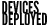
<style>
.page{position:relative;width:53px;height:25px;background:#ffffff}
.page>*{position:absolute;margin:0}
.t1{font:17px "LeagueGothic";color:#060606}
</style>
<div class="page">
<p class="t1" style="left:2px;top:0px;width:37px;height:14px">DEVICES</p>
<p class="t1" style="left:2px;top:12px;width:45px;height:14px">DEPLOYED</p>
</div>
